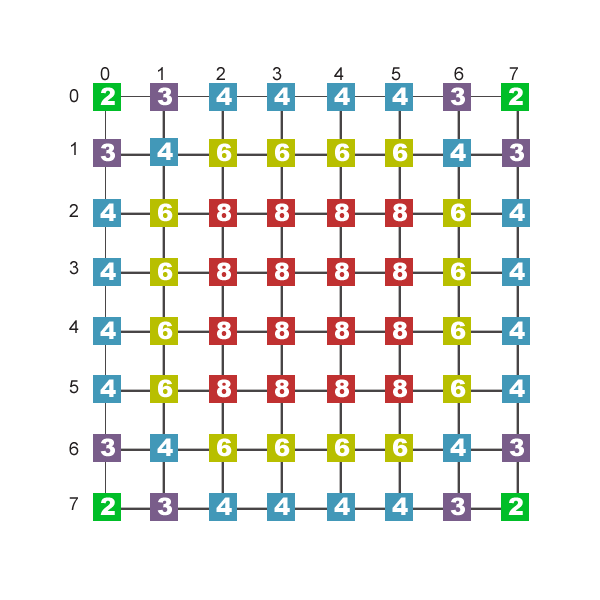
<style>
.page{position:relative;width:600px;height:600px;background:#ffffff}
.page>*{position:absolute;margin:0}
.t1{font:24px "Arial-Black";color:#ffffff}
</style>
<div class="page">
<p class="t1" style="left:100px;top:87px;width:15px;height:18px">2</p>
<p class="t1" style="left:157px;top:87px;width:15px;height:19px">3</p>
<p class="t1" style="left:216px;top:87px;width:16px;height:18px">4</p>
<p class="t1" style="left:274px;top:87px;width:16px;height:18px">4</p>
<p class="t1" style="left:334px;top:87px;width:16px;height:18px">4</p>
<p class="t1" style="left:392px;top:87px;width:16px;height:18px">4</p>
<p class="t1" style="left:450px;top:87px;width:15px;height:19px">3</p>
<p class="t1" style="left:508px;top:87px;width:15px;height:18px">2</p>
<p class="t1" style="left:100px;top:143px;width:15px;height:19px">3</p>
<p class="t1" style="left:157px;top:142px;width:16px;height:18px">4</p>
<p class="t1" style="left:217px;top:143px;width:15px;height:19px">6</p>
<p class="t1" style="left:275px;top:143px;width:15px;height:19px">6</p>
<p class="t1" style="left:335px;top:143px;width:15px;height:19px">6</p>
<p class="t1" style="left:393px;top:143px;width:15px;height:19px">6</p>
<p class="t1" style="left:450px;top:143px;width:16px;height:18px">4</p>
<p class="t1" style="left:509px;top:143px;width:15px;height:19px">3</p>
<p class="t1" style="left:100px;top:203px;width:16px;height:18px">4</p>
<p class="t1" style="left:158px;top:203px;width:15px;height:19px">6</p>
<p class="t1" style="left:217px;top:203px;width:14px;height:19px">8</p>
<p class="t1" style="left:275px;top:203px;width:14px;height:19px">8</p>
<p class="t1" style="left:335px;top:203px;width:14px;height:19px">8</p>
<p class="t1" style="left:393px;top:203px;width:14px;height:19px">8</p>
<p class="t1" style="left:451px;top:203px;width:15px;height:19px">6</p>
<p class="t1" style="left:509px;top:203px;width:16px;height:18px">4</p>
<p class="t1" style="left:100px;top:262px;width:16px;height:18px">4</p>
<p class="t1" style="left:158px;top:262px;width:15px;height:19px">6</p>
<p class="t1" style="left:217px;top:262px;width:14px;height:19px">8</p>
<p class="t1" style="left:275px;top:262px;width:14px;height:19px">8</p>
<p class="t1" style="left:335px;top:262px;width:14px;height:19px">8</p>
<p class="t1" style="left:393px;top:262px;width:14px;height:19px">8</p>
<p class="t1" style="left:451px;top:262px;width:15px;height:19px">6</p>
<p class="t1" style="left:509px;top:262px;width:16px;height:18px">4</p>
<p class="t1" style="left:100px;top:321px;width:16px;height:18px">4</p>
<p class="t1" style="left:158px;top:321px;width:15px;height:19px">6</p>
<p class="t1" style="left:217px;top:321px;width:14px;height:19px">8</p>
<p class="t1" style="left:275px;top:321px;width:14px;height:19px">8</p>
<p class="t1" style="left:335px;top:321px;width:14px;height:19px">8</p>
<p class="t1" style="left:393px;top:321px;width:14px;height:19px">8</p>
<p class="t1" style="left:451px;top:321px;width:15px;height:19px">6</p>
<p class="t1" style="left:509px;top:321px;width:16px;height:18px">4</p>
<p class="t1" style="left:100px;top:379px;width:16px;height:18px">4</p>
<p class="t1" style="left:158px;top:379px;width:15px;height:19px">6</p>
<p class="t1" style="left:217px;top:379px;width:14px;height:19px">8</p>
<p class="t1" style="left:275px;top:379px;width:14px;height:19px">8</p>
<p class="t1" style="left:335px;top:379px;width:14px;height:19px">8</p>
<p class="t1" style="left:393px;top:379px;width:14px;height:19px">8</p>
<p class="t1" style="left:451px;top:379px;width:15px;height:19px">6</p>
<p class="t1" style="left:509px;top:379px;width:16px;height:18px">4</p>
<p class="t1" style="left:100px;top:438px;width:15px;height:19px">3</p>
<p class="t1" style="left:157px;top:438px;width:16px;height:18px">4</p>
<p class="t1" style="left:217px;top:438px;width:15px;height:19px">6</p>
<p class="t1" style="left:275px;top:438px;width:15px;height:19px">6</p>
<p class="t1" style="left:335px;top:438px;width:15px;height:19px">6</p>
<p class="t1" style="left:393px;top:438px;width:15px;height:19px">6</p>
<p class="t1" style="left:450px;top:438px;width:16px;height:18px">4</p>
<p class="t1" style="left:509px;top:438px;width:15px;height:19px">3</p>
<p class="t1" style="left:100px;top:497px;width:15px;height:18px">2</p>
<p class="t1" style="left:157px;top:497px;width:15px;height:19px">3</p>
<p class="t1" style="left:216px;top:497px;width:16px;height:18px">4</p>
<p class="t1" style="left:274px;top:497px;width:16px;height:18px">4</p>
<p class="t1" style="left:334px;top:497px;width:16px;height:18px">4</p>
<p class="t1" style="left:392px;top:497px;width:16px;height:18px">4</p>
<p class="t1" style="left:450px;top:497px;width:15px;height:19px">3</p>
<p class="t1" style="left:508px;top:497px;width:15px;height:18px">2</p>
</div>
